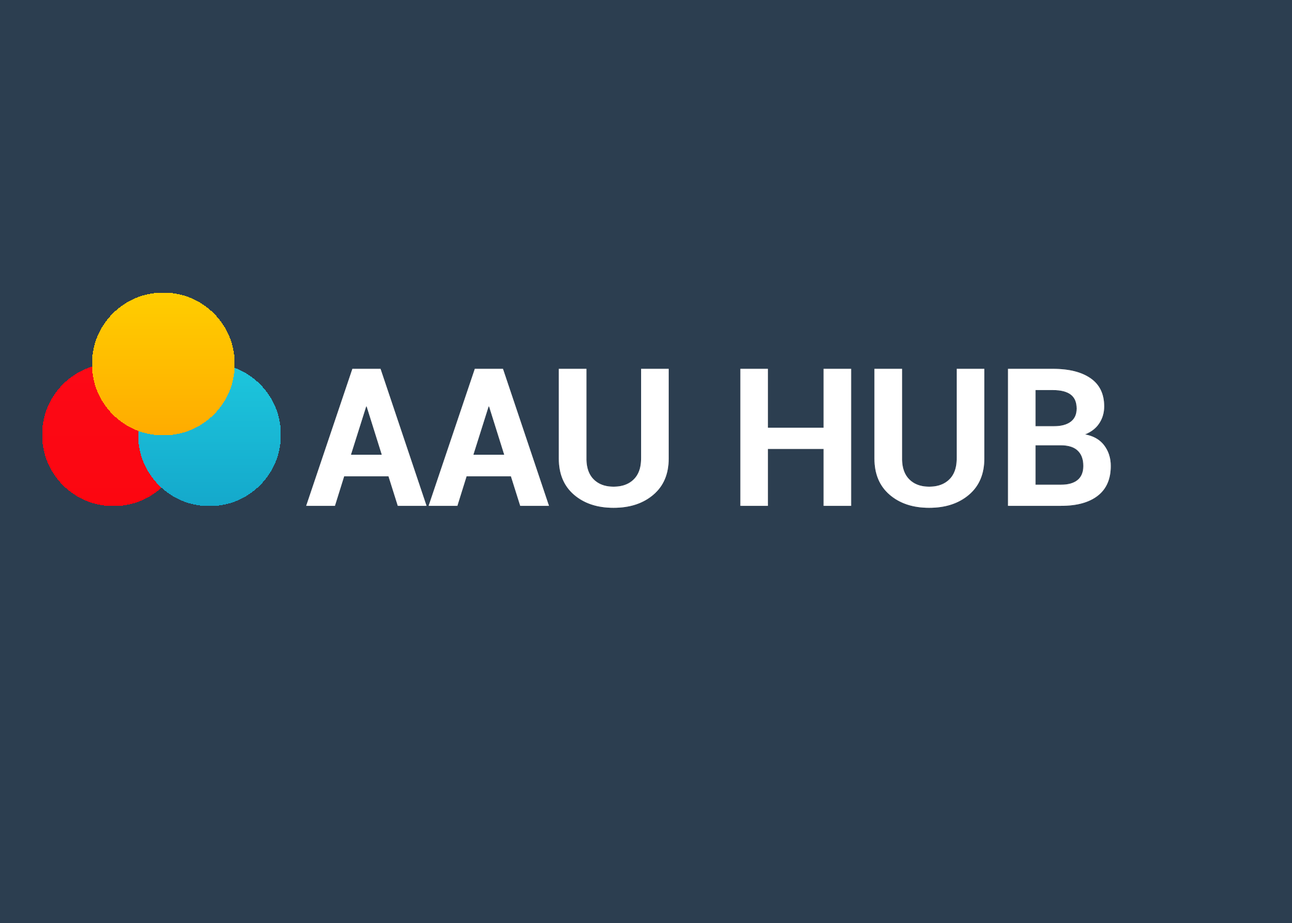
<style>
.page{position:relative;width:1292px;height:923px;background:#2c3e50}
.page>*{position:absolute;margin:0}
.t1{font:192.3px "Roboto-Bold";color:#ffffff}
</style>
<div class="page">
<p class="t1" style="left:306px;top:369px;width:805px;height:139px">AAU HUB</p>
</div>
